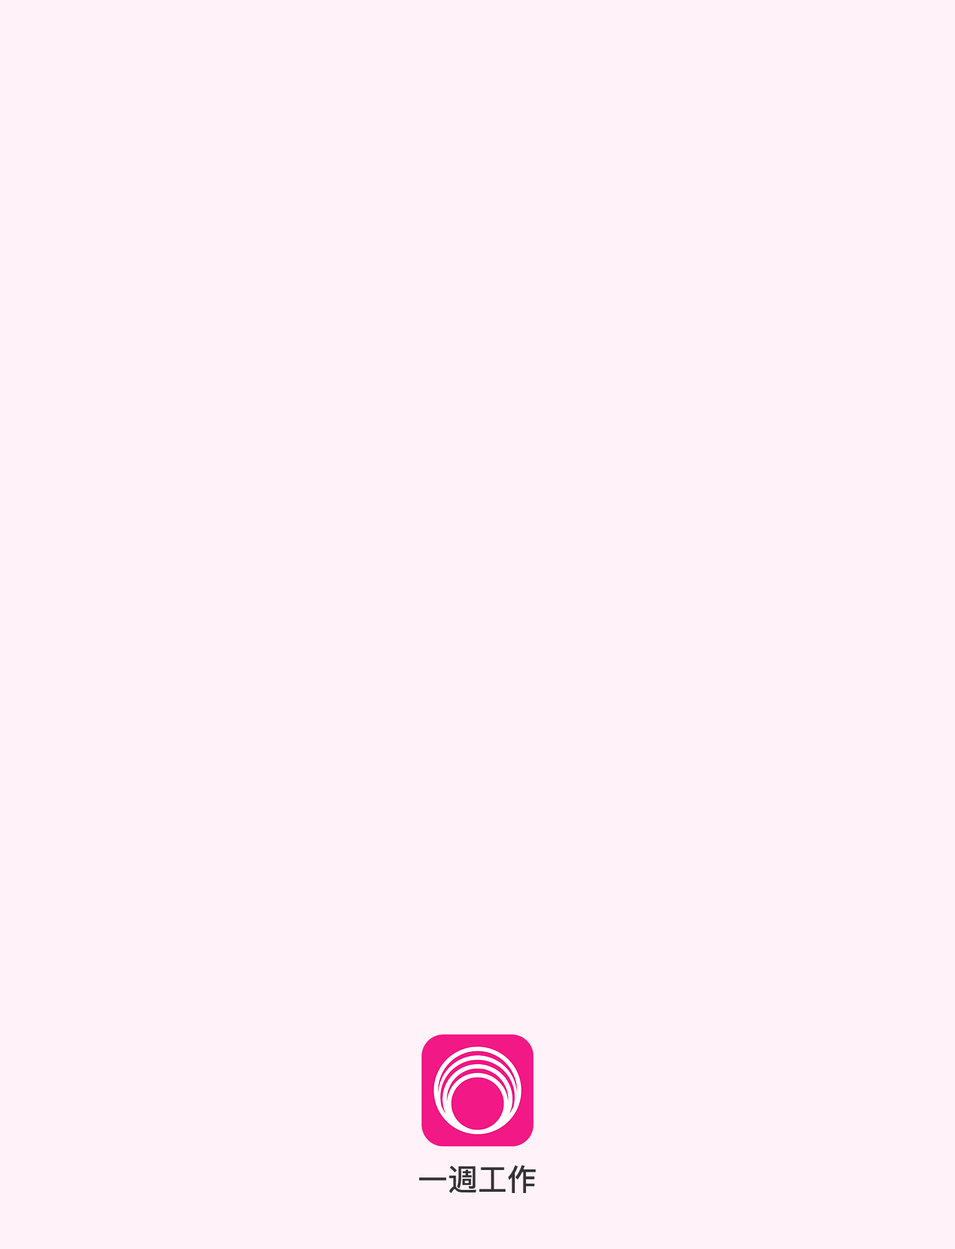
<style>
.page{position:relative;width:955px;height:1249px;background:#fff2f9}
.page>*{position:absolute;margin:0}
.t1{font:29.8px "PingFang-SC-Bold";color:#333333}
</style>
<div class="page">
<p class="t1" style="left:419px;top:1165px;width:117px;height:28px">一週工作</p>
</div>
